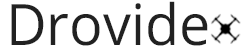
<style>
.page{position:relative;width:246px;height:52px;background:#ffffff}
.page>*{position:absolute;margin:0}
.t1{font:57px "OpenSans";color:#212121}
</style>
<div class="page">
<p class="t1" style="left:11px;top:1px;width:197px;height:45px">Drovide</p>
</div>
